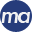
<style>
.page{position:relative;width:32px;height:32px;background:#263c7b}
.page>*{position:absolute;margin:0}
.t1{font:24px "Futura-MediumItalic";letter-spacing:-0.1em;color:#f2f2f2}
</style>
<div class="page">
<p class="t1" style="left:1px;top:12px;width:30px;height:11px">ma</p>
</div>
